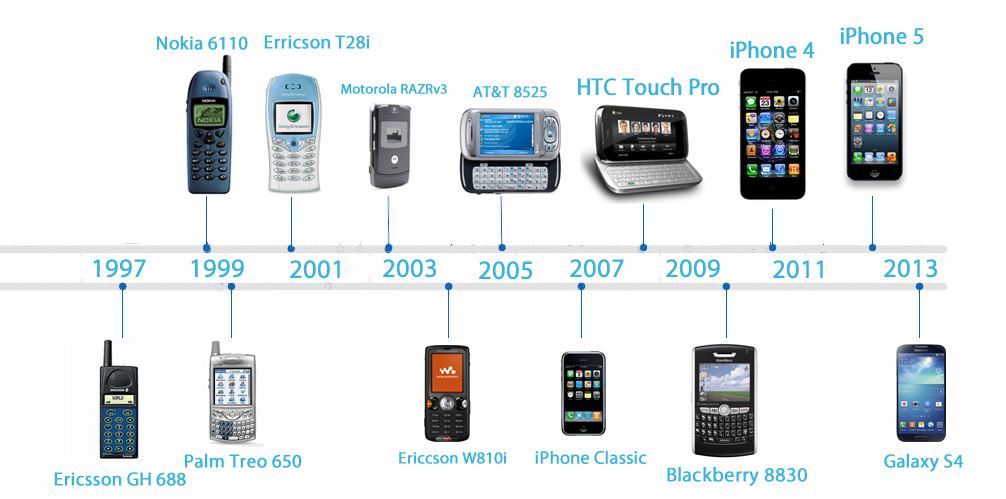
<style>
.page{position:relative;width:1006px;height:499px;background:#ffffff}
.page>*{position:absolute;margin:0}
.t1{font:24px "MyriadPro-Regular";color:#38b4de;font-weight:bold;scale:0.91 1}
.t2{font:18.9px "MyriadPro-Regular";color:#38b4de;font-weight:bold}
.t3{font:14px "MyriadPro-Regular";color:#38b4de;font-weight:bold}
.t4{font:26.3px "MyriadPro-Regular";color:#38b4de;font-weight:bold}
.t5{font:16.5px "MyriadPro-Regular";color:#38b4de;font-weight:bold}
.t6{font:18px "MyriadPro-Regular";color:#38b4de;font-weight:bold}
.t7{font:20px "MyriadPro-Regular";color:#38b4de;font-weight:bold}
</style>
<div class="page">
<p class="t1" style="left:840px;top:26px;width:84px;height:19px">iPhone 5</p>
<p class="t2" style="left:157px;top:35px;width:91px;height:15px">Nokia 6110</p>
<p class="t2" style="left:264px;top:35px;width:106px;height:14px">Erricson T28i</p>
<p class="t1" style="left:730px;top:40px;width:85px;height:19px">iPhone 4</p>
<p class="t1" style="left:578px;top:77px;width:142px;height:19px">HTC Touch Pro</p>
<p class="t3" style="left:341px;top:83px;width:106px;height:11px">Motorola RAZRv3</p>
<p class="t4" style="left:93px;top:259px;width:53px;height:19px">1997</p>
<p class="t4" style="left:191px;top:259px;width:53px;height:19px">1999</p>
<p class="t4" style="left:383px;top:259px;width:53px;height:19px">2003</p>
<p class="t4" style="left:479px;top:261px;width:53px;height:19px">2005</p>
<p class="t4" style="left:570px;top:259px;width:54px;height:19px">2007</p>
<p class="t4" style="left:666px;top:259px;width:54px;height:19px">2009</p>
<p class="t4" style="left:773px;top:260px;width:50px;height:19px">2011</p>
<p class="t4" style="left:884px;top:259px;width:53px;height:19px">2013</p>
<p class="t2" style="left:185px;top:453px;width:117px;height:15px">Palm Treo 650</p>
<p class="t5" style="left:399px;top:452px;width:107px;height:12px">Ericcson W810i</p>
<p class="t6" style="left:535px;top:450px;width:112px;height:14px">iPhone Classic</p>
<p class="t2" style="left:884px;top:453px;width:80px;height:19px">Galaxy S4</p>
<p class="t2" style="left:54px;top:472px;width:132px;height:14px">Ericsson GH 688</p>
<p class="t7" style="left:667px;top:467px;width:140px;height:19px">Blackberry 8830</p>
</div>
